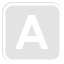
<style>
.page{position:relative;width:64px;height:64px;background:#e3e3e3}
.page>*{position:absolute;margin:0}
.t1{font:48px "CenturyGothic-Bold";color:#ffffff}
</style>
<div class="page">
<p class="t1" style="left:15px;top:15px;width:34px;height:34px">A</p>
</div>
